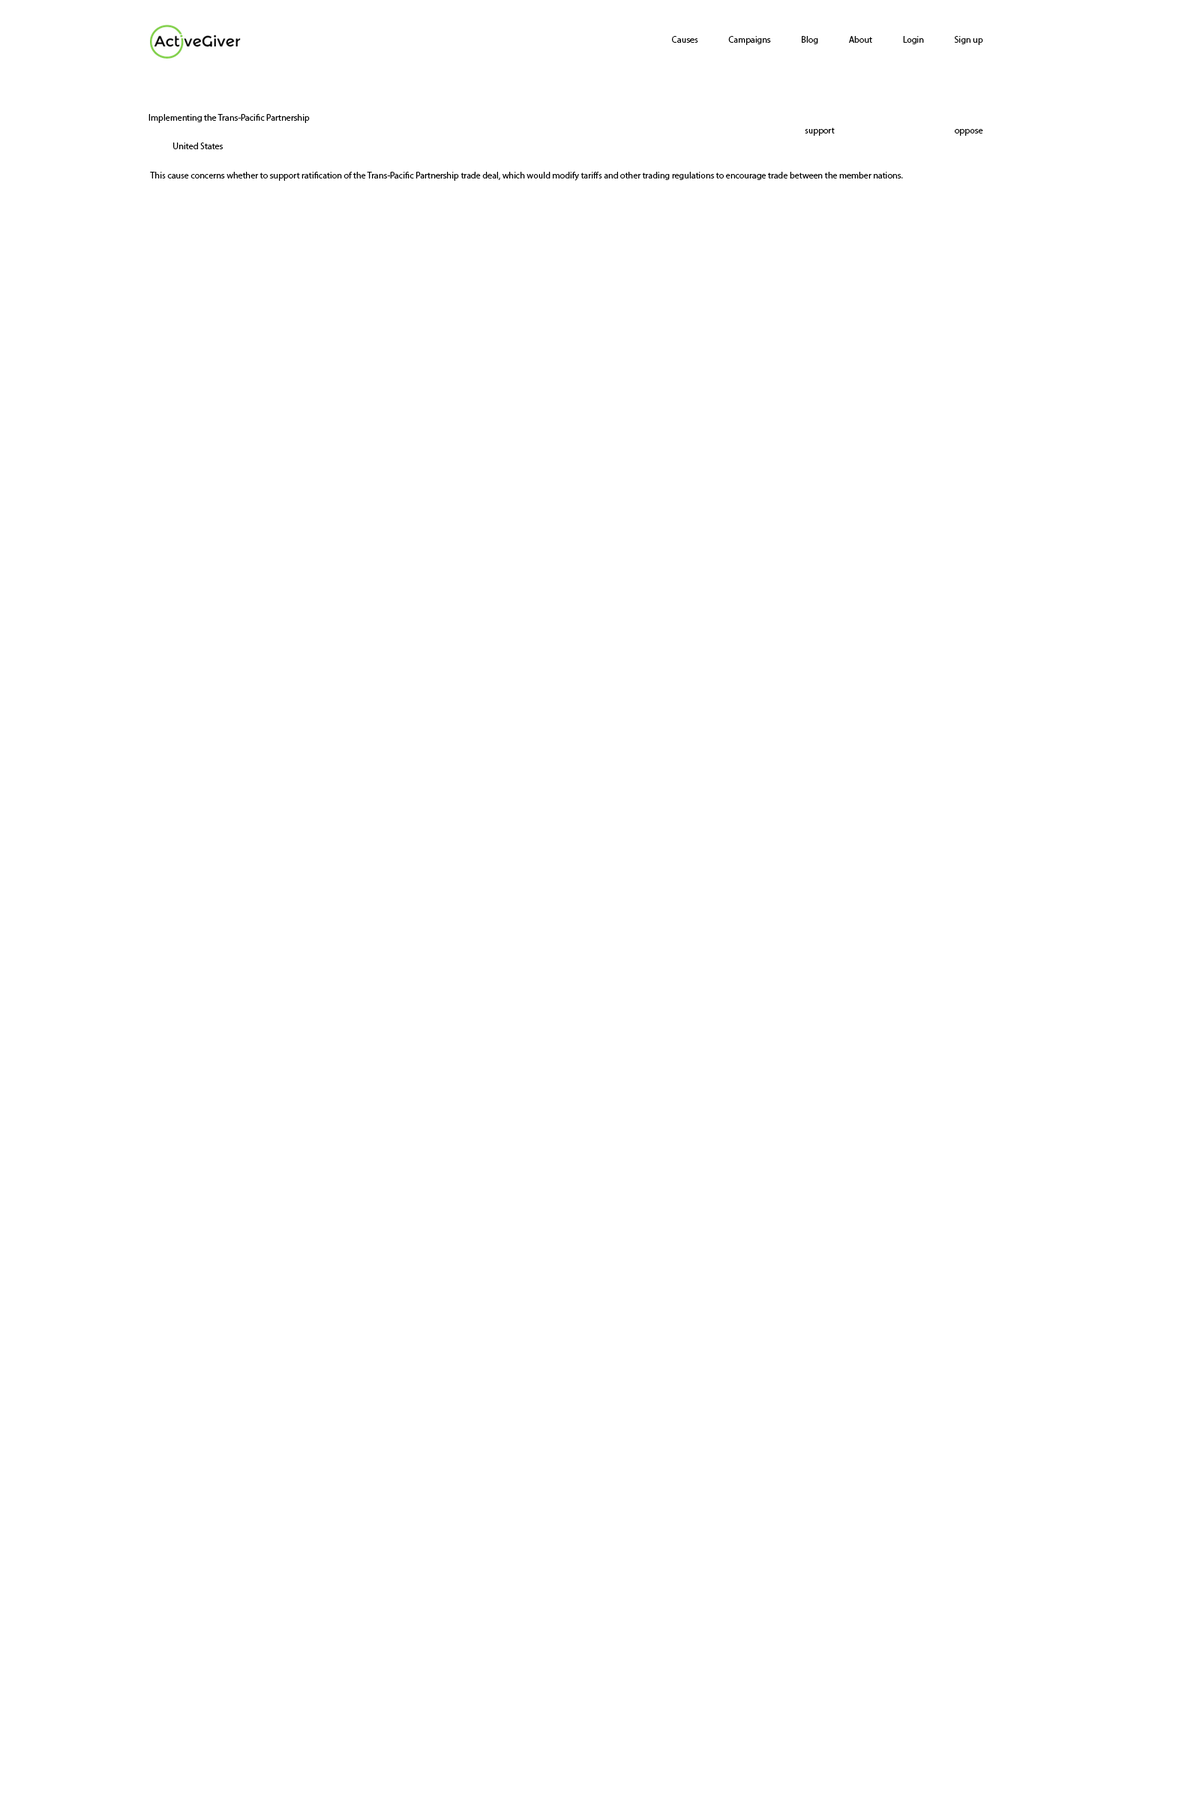
<style>
.page{position:relative;width:1200px;height:1800px;background:#ffffff}
.page>*{position:absolute;margin:0}
.t1{font:9px "MyriadPro-Regular";color:#000000}
</style>
<div class="page">
<p class="t1" style="left:672px;top:36px;width:311px;height:9px">Causes                Campaigns                Blog                About                Login                Sign up</p>
<p class="t1" style="left:148px;top:114px;width:162px;height:9px">Implementing the Trans-Pacific Partnership</p>
<p class="t1" style="left:805px;top:128px;width:30px;height:8px">support</p>
<p class="t1" style="left:955px;top:129px;width:28px;height:7px">oppose</p>
<p class="t1" style="left:173px;top:142px;width:50px;height:7px">United States</p>
<p class="t1" style="left:150px;top:172px;width:753px;height:9px">This cause concerns whether to support ratification of the Trans-Pacific Partnership trade deal, which would modify tariffs and other trading regulations to encourage trade between the member nations.</p>
</div>
